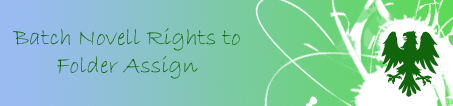
<style>
.page{position:relative;width:453px;height:106px}
.page>*{position:absolute;margin:0}
.t1{font:24px "BradleyHandITC";color:#11660d}
</style>
<div class="page">
<p class="t1" style="left:13px;top:28px;width:227px;height:51px;text-align:center">Batch Novell Rights to <br>Folder Assign</p>
</div>
